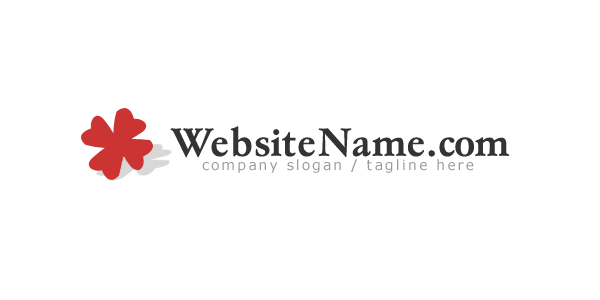
<style>
.page{position:relative;width:600px;height:300px;background:#ffffff}
.page>*{position:absolute;margin:0}
.t1{font:40px "GaramondNo4CyrTCY-Medi";color:#333333}
.t2{font:14px "Verdana";letter-spacing:0.15em;color:#999999}
</style>
<div class="page">
<p class="t1" style="left:170px;top:126px;width:340px;height:32px">WebsiteName.com</p>
<p class="t2" style="left:202px;top:159px;width:272px;height:14px">company slogan / tagline here</p>
</div>
